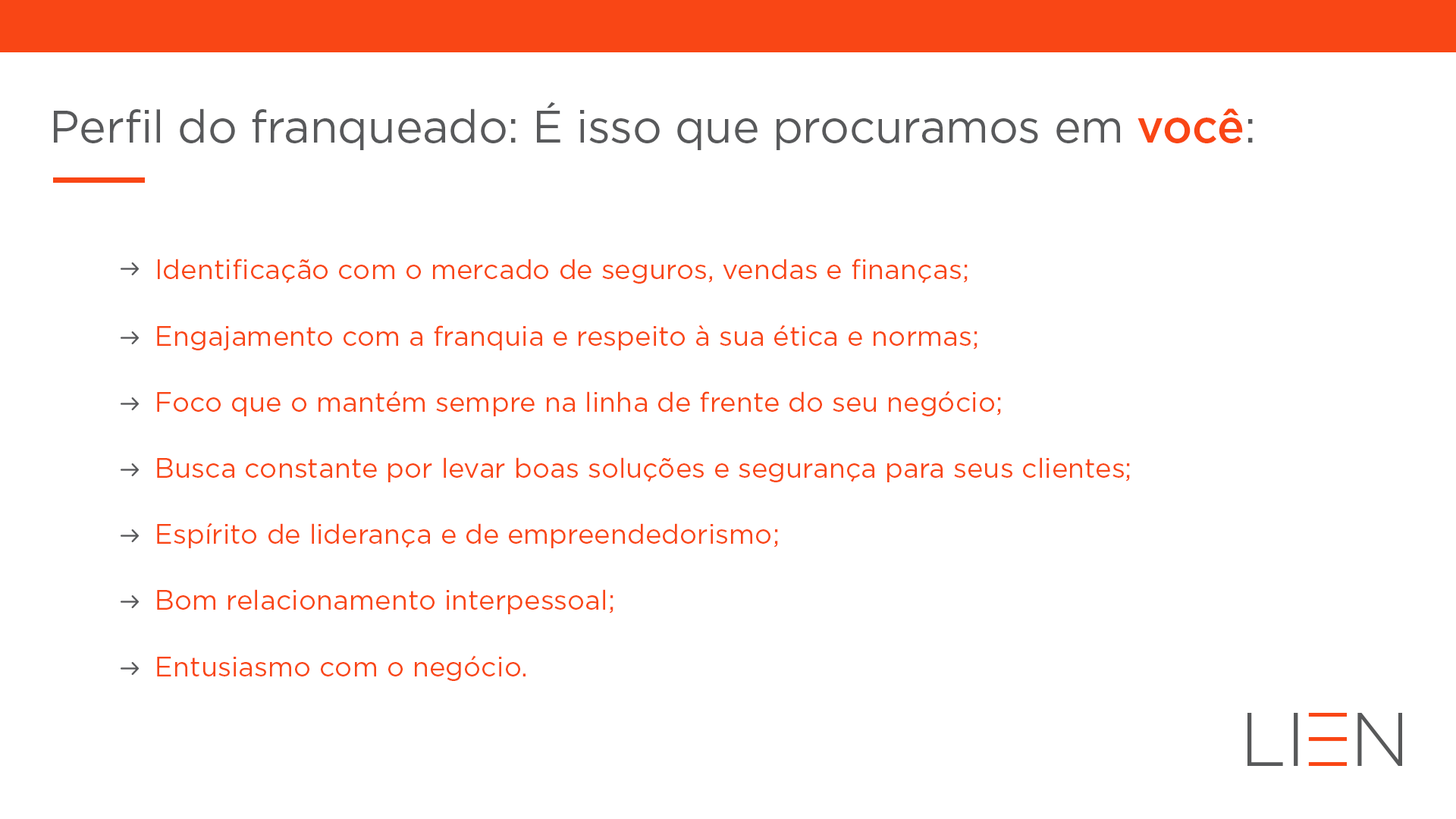
<style>
.page{position:relative;width:1456px;height:819px;background:#ffffff}
.page>*{position:absolute;margin:0}
.t1{font:45.5px "Gotham-Book";letter-spacing:-0.005em;color:#58595b}
.t2{font:45.5px "Gotham-Medium";letter-spacing:-0.005em;color:#f94615}
.t3{font:27.3px "Gotham-Book";color:#f94615}
</style>
<div class="page">
<p class="t1" style="left:54px;top:102px;width:1199px;height:48px">Perfil do franqueado: É isso que procuramos em <span class="t2">você</span>:</p>
<p class="t3" style="left:158px;top:259px;width:810px;height:25px">Identificação com o mercado de seguros, vendas e finanças;</p>
<p class="t3" style="left:157px;top:325px;width:820px;height:25px">Engajamento com a franquia e respeito à sua ética e normas;</p>
<p class="t3" style="left:157px;top:391px;width:844px;height:25px">Foco que o mantém sempre na linha de frente do seu negócio;</p>
<p class="t3" style="left:157px;top:457px;width:973px;height:25px">Busca constante por levar boas soluções e segurança para seus clientes;</p>
<p class="t3" style="left:157px;top:522px;width:621px;height:26px">Espírito de liderança e de empreendedorismo;</p>
<p class="t3" style="left:157px;top:589px;width:456px;height:25px">Bom relacionamento interpessoal;</p>
<p class="t3" style="left:157px;top:655px;width:369px;height:26px">Entusiasmo com o negócio.</p>
</div>
